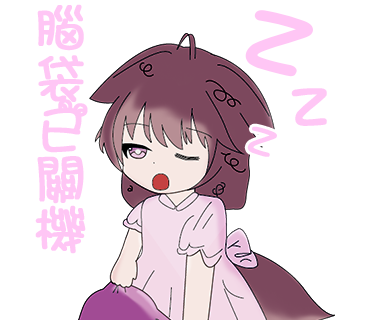
<style>
.page{position:relative;width:370px;height:320px;background:#ffffff}
.page>*{position:absolute;margin:0}
.t1{font:56px/50.4px "ARTianniuB5-Bold";color:#ffc6f5;font-weight:bold}
.t2{font:121.8px "ARTianniuB5-Bold";color:#ffc6f5;font-weight:bold;scale:1.09 1}
.t3{font:78.8px "ARTianniuB5-Bold";color:#ffc6f5;font-weight:bold;scale:0.96 1}
</style>
<div class="page">
<p class="t1" style="left:35px;top:4px;width:53px;height:250px">腦<br>袋<br>已<br>關<br>機</p>
<p class="t2" style="left:245px;top:10px;width:68px;height:67px;rotate:18deg">z</p>
<p class="t3" style="left:291px;top:88px;width:36px;height:38px">z</p>
</div>
